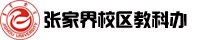
<style>
.page{position:relative;width:200px;height:40px;background:#ffffff}
.page>*{position:absolute;margin:0}
.t1{font:18px "hzgb";color:#010000}
</style>
<div class="page">
<p class="t1" style="left:44px;top:11px;width:143px;height:17px">张家界校区教科办</p>
</div>
